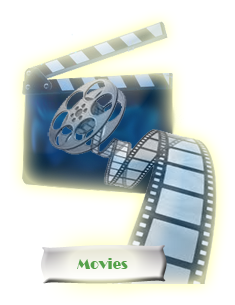
<style>
.page{position:relative;width:235px;height:305px;background:#ffffff}
.page>*{position:absolute;margin:0}
.t1{font:14px "Broadway";color:#55a14b}
</style>
<div class="page">
<p class="t1" style="left:77px;top:258px;width:51px;height:11px">Movies</p>
</div>
